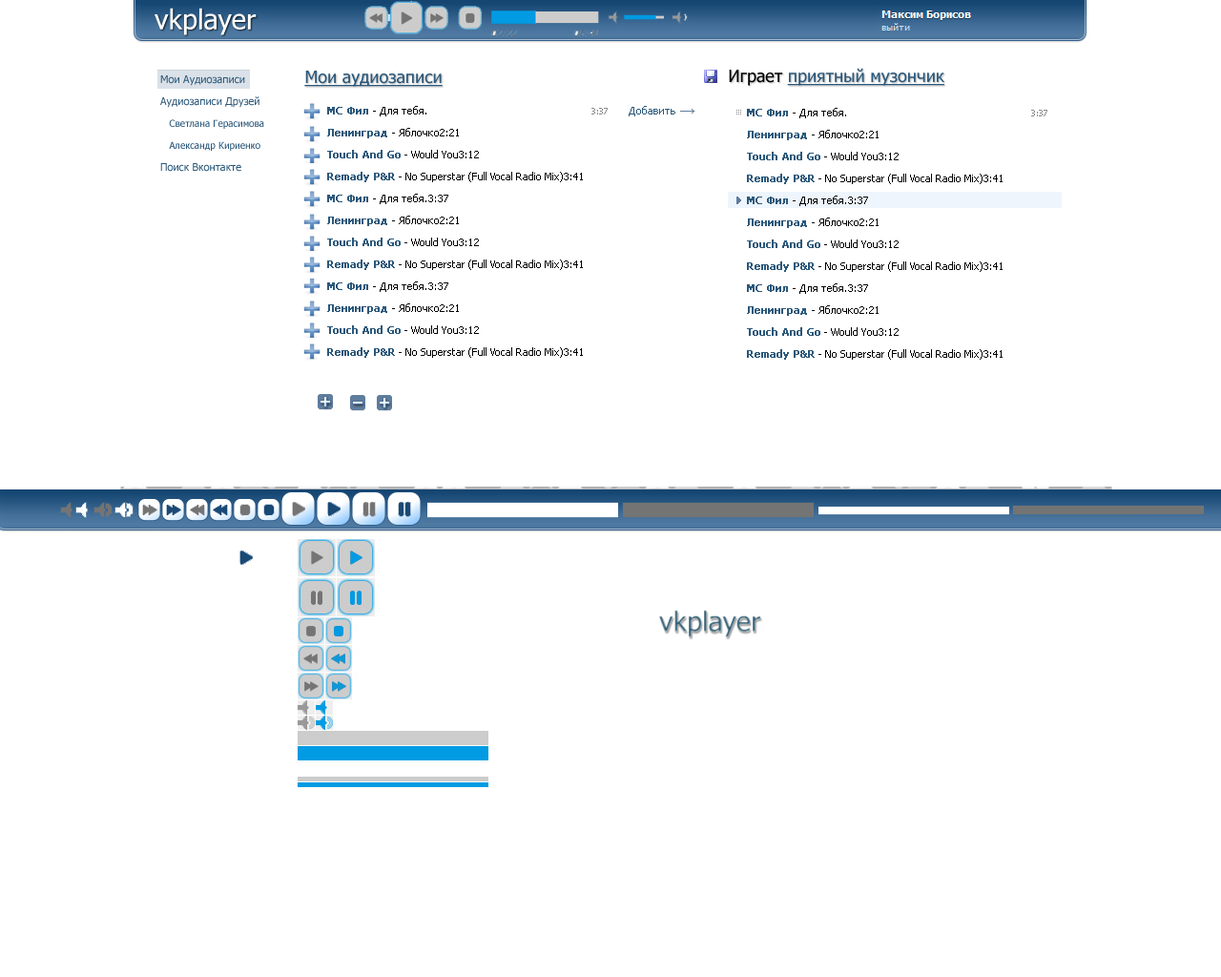
<style>
.page{position:relative;width:1221px;height:977px;background:#ffffff}
.page>*{position:absolute;margin:0}
.t1{font:27.7px "Tahoma";color:#ffffff}
.t2{font:9.5px/21.9px "Tahoma";color:#2b587a}
.t3{font:10.5px/21.9px "Tahoma";color:#2b587a}
.t4{font:17.2px "Tahoma";color:#2b587a;text-decoration:underline}
.t5{font:17.2px "Tahoma";color:#000000}
.t6{font:10.5px/21.9px "Tahoma";color:#000000}
.t7{font:10.5px/21.9px "Tahoma";color:#2b587a;font-weight:bold}
.t8{font:8.6px/21.9px "Tahoma";color:#8a8a8a}
.t9{font:27.7px "Tahoma"}
</style>
<div class="page">
<p class="t1" style="left:155px;top:8px;width:102px;height:27px">vkplayer</p>
<p class="t2" style="left:160px;top:75px;width:104px;height:97px"><span class="t3">Мои Аудиозаписи<br>Аудиозаписи Друзей<br></span>   Светлана Герасимова<br>   Александр Кириенко<br><span class="t3">Поиск Вконтакте</span></p>
<p class="t4" style="left:304px;top:71px;width:139px;height:16px">Мои аудиозаписи</p>
<p class="t4" style="left:729px;top:68px;width:215px;height:18px"><span class="t5">Играет </span>приятный музончик</p>
<p class="t6" style="left:327px;top:106px;width:348px;height:252px"><span class="t7">МС Фил </span>- Для тебя.                                                         <span class="t8">3:37       </span><span class="t3">Добавить  <br>  </span><span class="t7">Ленинград </span>- Яблочко2:21<br>  <span class="t7">Touch And Go</span> - Would You3:12<br>  <span class="t7">Remady P&amp;R</span> - No Superstar (Full Vocal Radio Mix)3:41<br>   <span class="t7">МС Фил </span>- Для тебя.3:37<br>  <span class="t7">Ленинград </span>- Яблочко2:21<br>  <span class="t7">Touch And Go</span> - Would You3:12<br>  <span class="t7">Remady P&amp;R</span> - No Superstar (Full Vocal Radio Mix)3:41<br>   <span class="t7">МС Фил </span>- Для тебя.3:37<br>  <span class="t7">Ленинград </span>- Яблочко2:21<br>  <span class="t7">Touch And Go</span> - Would You3:12<br>  <span class="t7">Remady P&amp;R</span> - No Superstar (Full Vocal Radio Mix)3:41</p>
<p class="t6" style="left:747px;top:108px;width:300px;height:252px"><span class="t7">МС Фил </span>- Для тебя.                                                                <span class="t8">3:37<br>  </span><span class="t7">Ленинград </span>- Яблочко2:21<br>  <span class="t7">Touch And Go</span> - Would You3:12<br>  <span class="t7">Remady P&amp;R</span> - No Superstar (Full Vocal Radio Mix)3:41<br>   <span class="t7">МС Фил </span>- Для тебя.3:37<br>  <span class="t7">Ленинград </span>- Яблочко2:21<br>  <span class="t7">Touch And Go</span> - Would You3:12<br>  <span class="t7">Remady P&amp;R</span> - No Superstar (Full Vocal Radio Mix)3:41<br>   <span class="t7">МС Фил </span>- Для тебя.3:37<br>  <span class="t7">Ленинград </span>- Яблочко2:21<br>  <span class="t7">Touch And Go</span> - Would You3:12<br>  <span class="t7">Remady P&amp;R</span> - No Superstar (Full Vocal Radio Mix)3:41</p>
<p class="t9" style="left:659px;top:609px;width:102px;height:28px">vkplayer</p>
</div>
